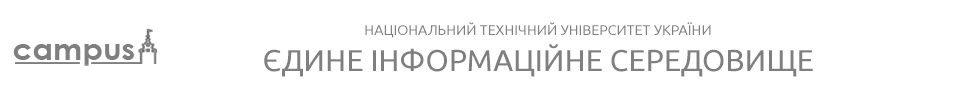
<style>
.page{position:relative;width:960px;height:100px;background:#ffffff}
.page>*{position:absolute;margin:0}
.t1{font:14px "Ubuntu";color:#7f7f7f;text-transform:uppercase}
.t2{font:30px "Ubuntu";color:#7f7f7f;text-transform:uppercase}
</style>
<div class="page">
<p class="t1" style="left:264px;top:22px;width:549px;height:55px;text-align:center">Національний технічний університет України<br><span class="t2">Єдине інформаційне середовище</span></p>
</div>
